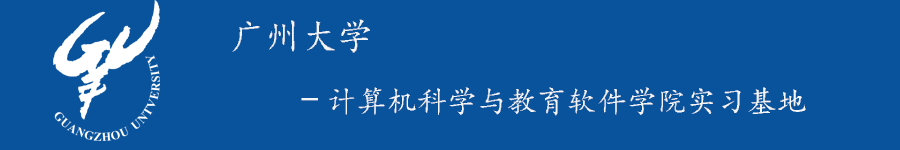
<style>
.page{position:relative;width:900px;height:150px;background:#09539d}
.page>*{position:absolute;margin:0}
.t1{font:30px "¿¬Ìå";color:#f3f6f7}
.t2{font:36px "¿¬Ìå";color:#f3f6f7}
</style>
<div class="page">
<p class="t1" style="left:232px;top:19px;width:574px;height:97px"><span class="t2">广州大学<br>    -</span>计算机科学与教育软件学院实习基地</p>
</div>
